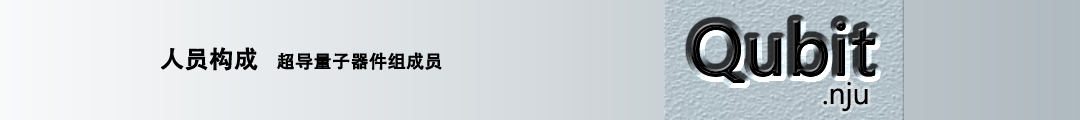
<style>
.page{position:relative;width:1080px;height:120px}
.page>*{position:absolute;margin:0}
.t1{font:18px "AdobeHeitiStd-Regular";color:#000000;font-weight:bold}
.t2{font:24px "AdobeHeitiStd-Regular";color:#000000;font-weight:bold}
</style>
<div class="page">
<p class="t1" style="left:161px;top:47px;width:281px;height:24px"><span class="t2">人员构成   </span>超导量子器件组成员</p>
</div>
